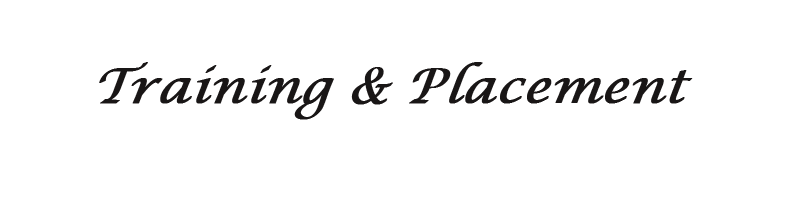
<style>
.page{position:relative;width:800px;height:200px;background:#ffffff}
.page>*{position:absolute;margin:0}
.t1{font:48px "LucidaCalligraphy-Italic";color:#191616;font-weight:bold;font-style:italic}
</style>
<div class="page">
<p class="t1" style="left:99px;top:62px;width:594px;height:58px">Training &amp; Placement</p>
</div>
